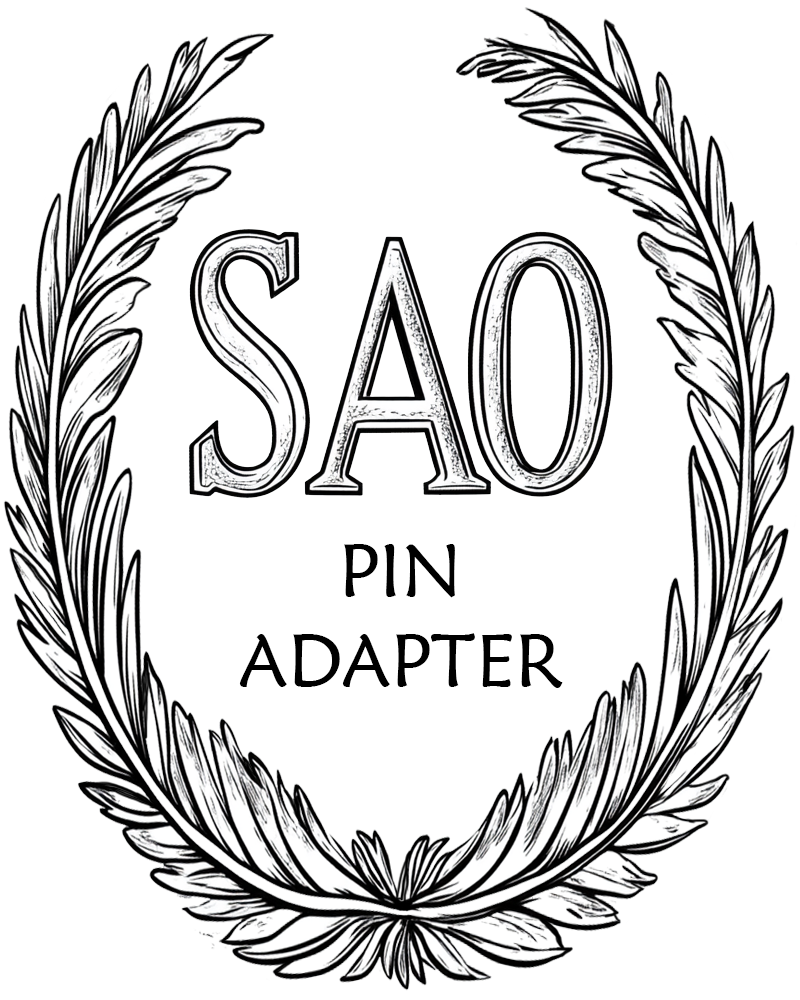
<style>
.page{position:relative;width:800px;height:1000px;background:#ffffff}
.page>*{position:absolute;margin:0}
.t1{font:75px "MaiandraGD-Regular";color:#000000}
</style>
<div class="page">
<p class="t1" style="left:239px;top:544px;width:324px;height:144px;text-align:center">PIN<br>ADAPTER</p>
</div>
